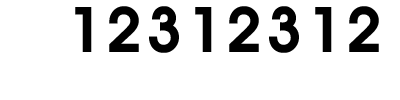
<style>
.page{position:relative;width:400px;height:100px;background:#ffffff}
.page>*{position:absolute;margin:0}
.t1{font:60px "HYtbrB";color:#000000}
</style>
<div class="page">
<p class="t1" style="left:75px;top:6px;width:304px;height:47px">12312312</p>
</div>
